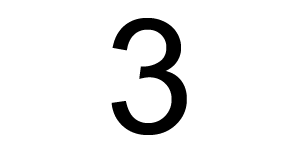
<style>
.page{position:relative;width:300px;height:150px;background:#ffffff}
.page>*{position:absolute;margin:0}
.t1{font:160px "ArialMT";color:#000000}
</style>
<div class="page">
<p class="t1" style="left:111px;top:18px;width:76px;height:117px">3</p>
</div>
